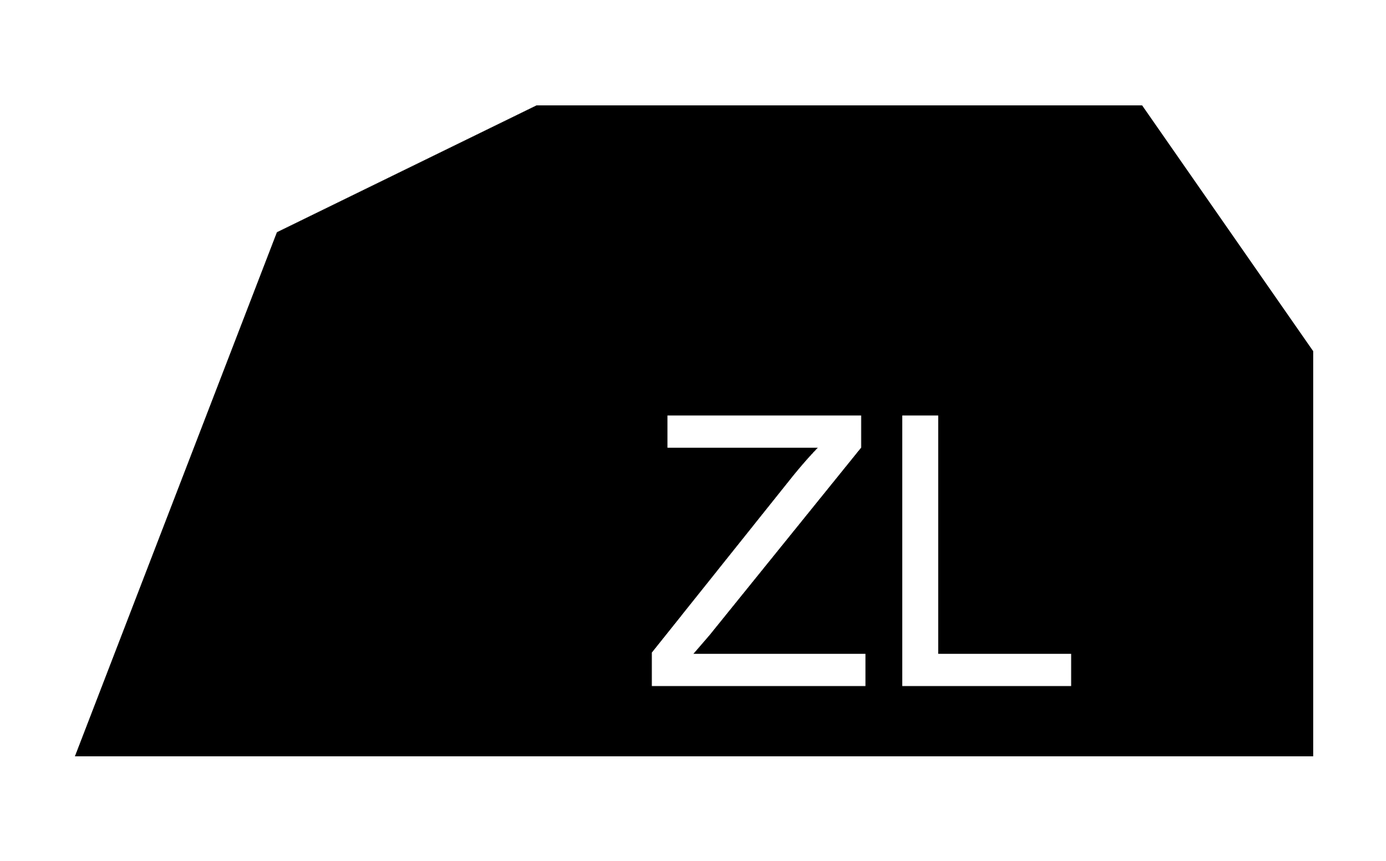
<style>
.page{position:relative;width:1386px;height:861px;background:#000000}
.page>*{position:absolute;margin:0}
.t1{font:377.1px "ArialMT";color:#ffffff}
</style>
<div class="page">
<p class="t1" style="left:651px;top:415px;width:420px;height:271px">ZL</p>
</div>
